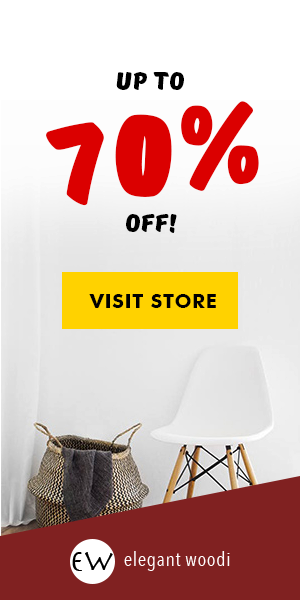
<style>
.page{position:relative;width:300px;height:600px}
.page>*{position:absolute;margin:0}
.t1{font:25px "TTMastersDEMOBlack";letter-spacing:0.03em;color:#000000}
.t2{font:111px "TTMastersDEMOBlack";letter-spacing:0.03em;color:#db0000;font-weight:bold}
.t3{font:20px "FuturaBT-Bold";letter-spacing:0.03em;color:#000000;text-transform:uppercase}
</style>
<div class="page">
<p class="t1" style="left:116px;top:72px;width:68px;height:18px">UP TO</p>
<p class="t2" style="left:46px;top:101px;width:213px;height:105px;rotate:-9deg">70%</p>
<p class="t1" style="left:126px;top:214px;width:51px;height:19px">OFF!</p>
<p class="t3" style="left:89px;top:294px;width:127px;height:14px">VISIT STORE</p>
</div>
